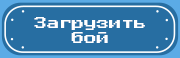
<style>
.page{position:relative;width:180px;height:58px;background:#276ea2}
.page>*{position:absolute;margin:0}
.t1{font:12.5px "PressStart2P-Regular";color:#ffffff}
</style>
<div class="page">
<p class="t1" style="left:34px;top:17px;width:111px;height:26px;text-align:center">Загрузить<br>бой</p>
</div>
